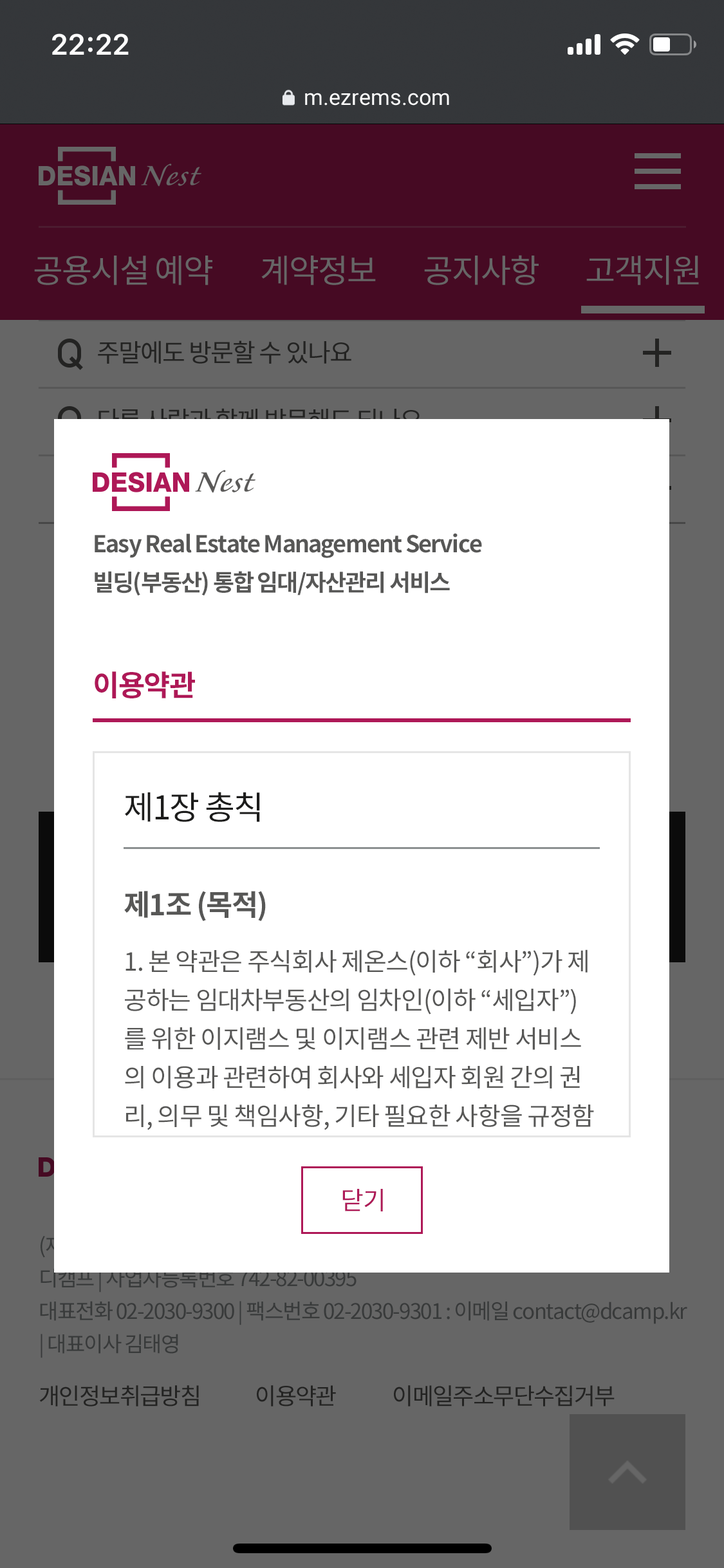
<style>
.page{position:relative;width:724px;height:1568px;background:#ffffff}
.page>*{position:absolute;margin:0}
.t1{font:23.2px/38.6px "NotoSansCJKkr-Bold";letter-spacing:-0.05em;color:#575756}
.t2{font:29px "NotoSansCJKkr-Bold";letter-spacing:-0.03em;color:#ae1857}
.t3{font:32.8px "NotoSansCJKkr-Regular";letter-spacing:-0.035em;color:#1c1c1b}
.t4{font:29px "NotoSansCJKkr-Bold";letter-spacing:-0.035em;color:#575756}
.t5{font:25.1px/38.6px "NotoSansCJKkr-Regular";letter-spacing:-0.035em;color:#575756}
.t6{font:25.1px "NotoSansCJKkr-Regular";letter-spacing:-0.035em;color:#ae1857}
</style>
<div class="page">
<p class="t1" style="left:95px;top:533px;width:387px;height:63px">Easy Real Estate Management Service<br>빌딩(부동산) 통합 임대/자산관리 서비스</p>
<p class="t2" style="left:95px;top:671px;width:100px;height:27px">이용약관</p>
<p class="t3" style="left:125px;top:792px;width:135px;height:30px">제1장 총칙</p>
<p class="t4" style="left:124px;top:891px;width:142px;height:30px">제1조 (목적)</p>
<p class="t5" style="left:125px;top:949px;width:469px;height:217px">1. 본 약관은 주식회사 제온스(이하 “회사”)가 제<br>공하는 임대차부동산의 임차인(이하 “세입자”)<br>를 위한 이지램스 및 이지램스 관련 제반 서비스<br>의 이용과 관련하여 회사와 세입자 회원 간의 권<br>리, 의무 및 책임사항, 기타 필요한 사항을 규정함<br>을 목적으로 합니다.</p>
<p class="t6" style="left:342px;top:1189px;width:41px;height:22px">닫기</p>
</div>
